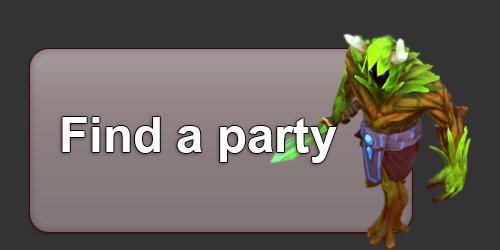
<style>
.page{position:relative;width:500px;height:250px;background:#333333}
.page>*{position:absolute;margin:0}
.t1{font:75px "BrowalliaNew-Bold";color:#ffffff}
</style>
<div class="page">
<p class="t1" style="left:62px;top:117px;width:275px;height:46px">Find a party</p>
</div>
